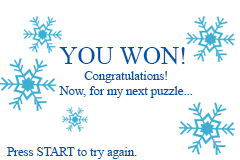
<style>
.page{position:relative;width:240px;height:160px;background:#ffffff}
.page>*{position:absolute;margin:0}
.t1{font:25px "TimesNewRomanPSMT";color:#0054a6}
.t2{font:12.5px "TimesNewRomanPSMT";color:#0054a6}
</style>
<div class="page">
<p class="t1" style="left:59px;top:47px;width:126px;height:18px">YOU WON!</p>
<p class="t2" style="left:59px;top:71px;width:134px;height:27px;text-align:center">Congratulations!<br>Now, for my next puzzle...</p>
<p class="t2" style="left:7px;top:147px;width:130px;height:12px">Press START to try again.</p>
</div>
